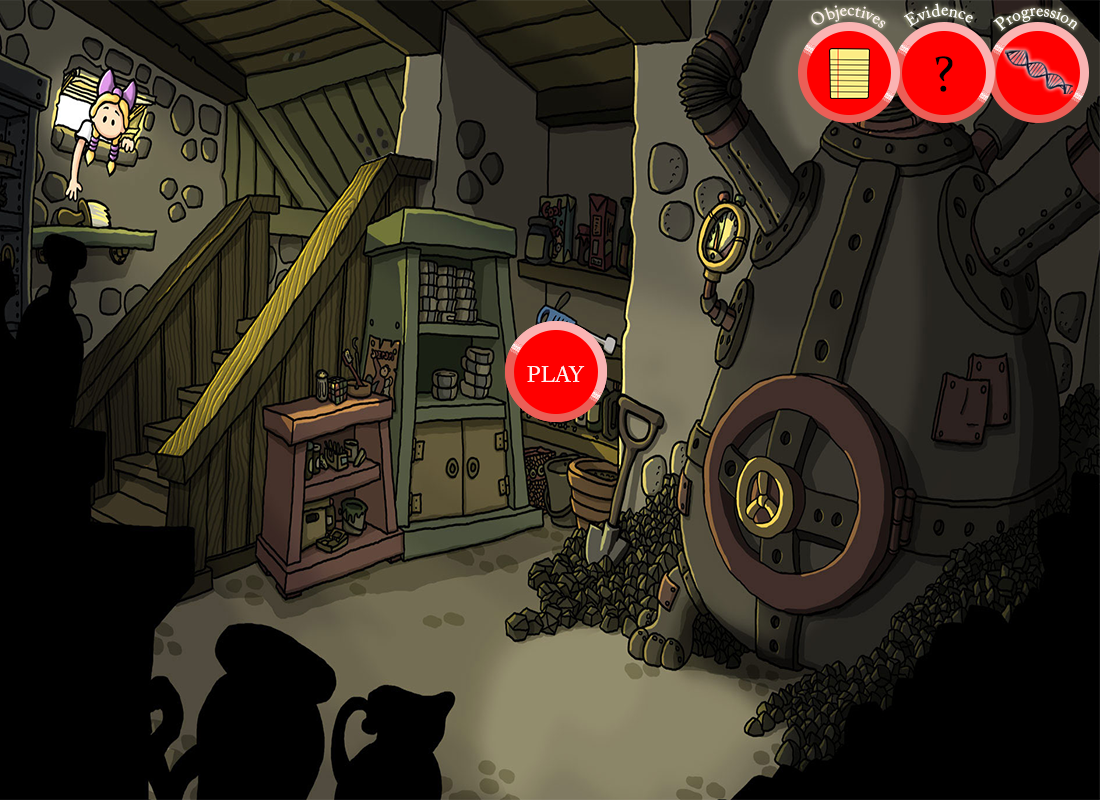
<style>
.page{position:relative;width:1100px;height:800px;background:#000000}
.page>*{position:absolute;margin:0}
.t1{font:17.1px "ACaslonPro-Regular";color:#fff2f2}
.t2{font:17.1px "ACaslonPro-Regular";color:#ffffff}
.t3{font:17px "ACaslonPro-Regular";color:#ffffff}
.t4{font:51.3px "Constantia";color:#000000}
.t5{font:21.8px "ACaslonPro-Regular";color:#fff2f2}
</style>
<div class="page">
<p class="t1" style="left:811px;top:5px;width:75px;height:23px;rotate:6deg">Objectives</p>
<p class="t2" style="left:904px;top:3px;width:69px;height:24px;rotate:6deg">Evidence</p>
<p class="t3" style="left:993px;top:8px;width:84px;height:23px">Progression</p>
<p class="t4" style="left:935px;top:56px;width:18px;height:36px">?</p>
<p class="t5" style="left:527px;top:365px;width:58px;height:17px">PLAY</p>
<p class="t5" style="left:527px;top:365px;width:58px;height:17px">PLAY</p>
</div>
